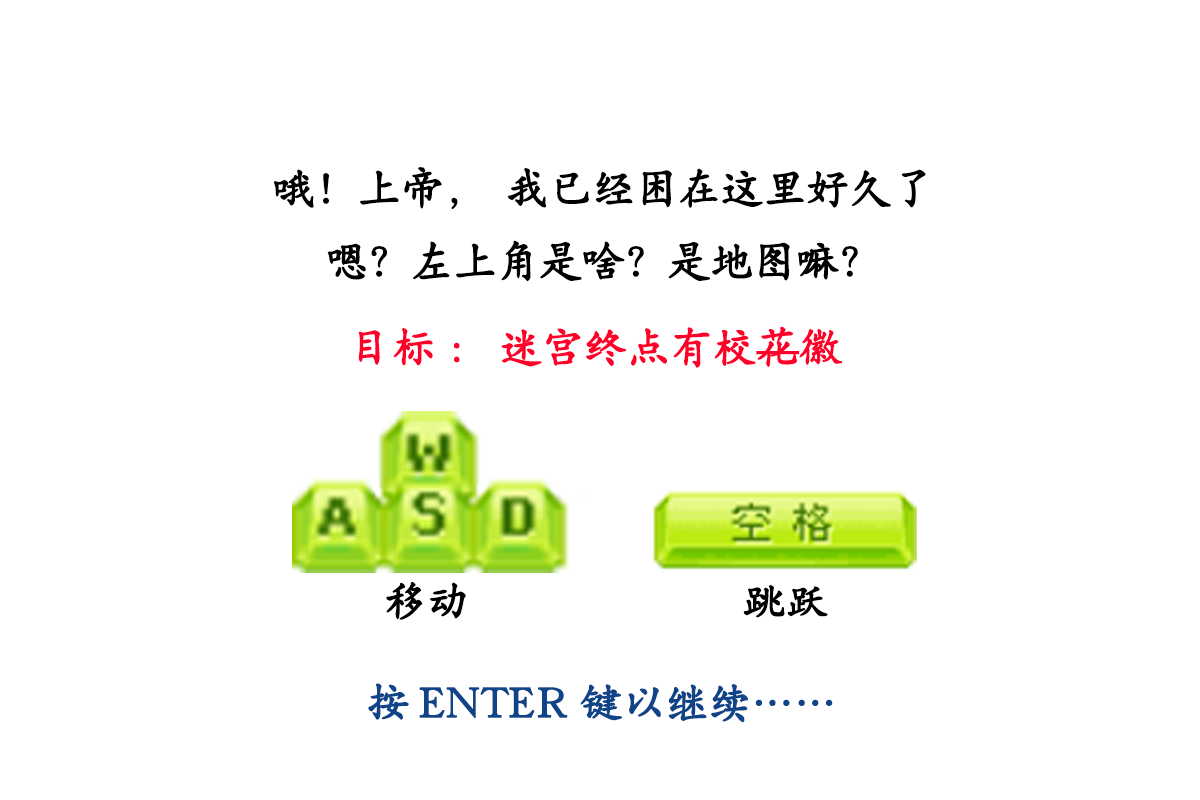
<style>
.page{position:relative;width:1200px;height:800px;background:#ffffff}
.page>*{position:absolute;margin:0}
.t1{font:41.7px "HGKT_CNKI";color:#000000;font-weight:bold}
.t2{font:41.7px "HGKT_CNKI";color:#ff002a;font-weight:bold}
.t3{font:41.7px "HGKT_CNKI";color:#0f4489;font-weight:bold}
</style>
<div class="page">
<p class="t1" style="left:273px;top:167px;width:653px;height:115px;text-align:center">哦！上帝，我已经困在这里好久了<br>嗯？左上角是啥？是地图嘛？</p>
<p class="t2" style="left:358px;top:326px;width:484px;height:42px">目标：迷宫终点有校花徽</p>
<p class="t1" style="left:386px;top:581px;width:80px;height:39px">移动</p>
<p class="t1" style="left:743px;top:585px;width:85px;height:33px">跳跃</p>
<p class="t3" style="left:368px;top:683px;width:465px;height:40px">按ENTER键以继续……</p>
</div>
